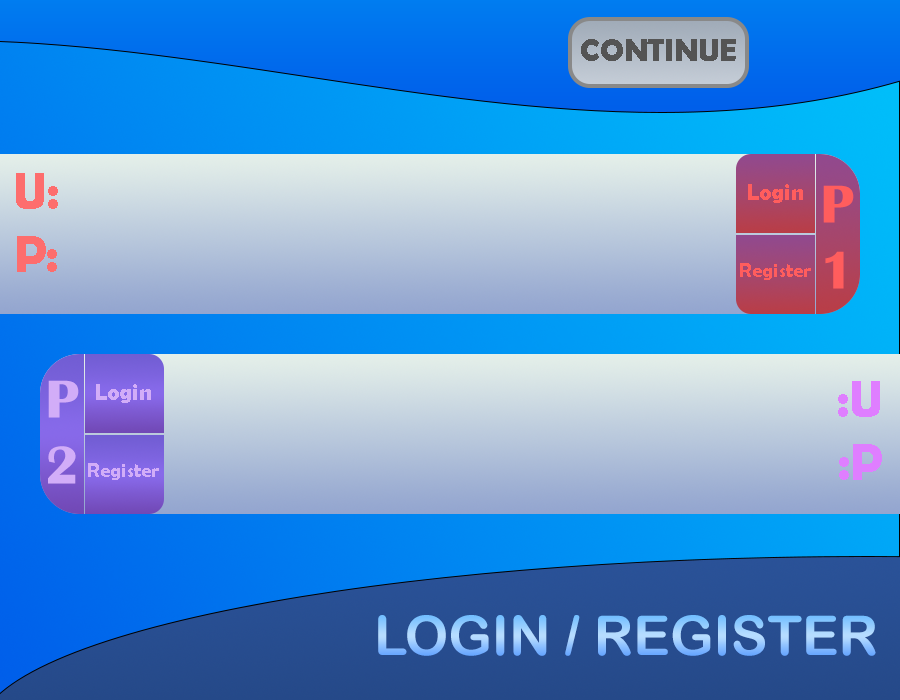
<style>
.page{position:relative;width:900px;height:700px}
.page>*{position:absolute;margin:0}
.t1{font:32px "BerlinSansFBDemi-Bold";color:#545454}
.t2{font:51.9px "BerlinSansFBDemi-Bold";color:#fd6d6d;scale:0.96 1}
.t3{font:23px "BerlinSansFBDemi-Bold";color:#ff5d5d}
.t4{font:55px "BritannicBold";color:#ff5d5d}
.t5{font:20px "BerlinSansFBDemi-Bold";color:#ff5d5d}
.t6{font:55px "BritannicBold";color:#d2adf8}
.t7{font:23px "BerlinSansFBDemi-Bold";color:#d2adf8}
.t8{font:51.9px "BerlinSansFBDemi-Bold";color:#df7eff;scale:0.96 1}
.t9{font:20px "BerlinSansFBDemi-Bold";color:#d2adf8}
.t10{font:55px "ArialRoundedMTBold"}
</style>
<div class="page">
<p class="t1" style="left:581px;top:39px;width:155px;height:22px">CONTINUE</p>
<p class="t2" style="left:16px;top:173px;width:42px;height:99px;text-align:center">U:<br>P:</p>
<p class="t3" style="left:748px;top:184px;width:55px;height:19px">Login</p>
<p class="t4" style="left:823px;top:185px;width:31px;height:104px;text-align:center">P1</p>
<p class="t5" style="left:740px;top:263px;width:71px;height:17px">Register</p>
<p class="t6" style="left:48px;top:380px;width:31px;height:104px;text-align:center">P2</p>
<p class="t7" style="left:96px;top:384px;width:55px;height:19px">Login</p>
<p class="t8" style="left:838px;top:381px;width:44px;height:99px;text-align:center">:U<br>:P</p>
<p class="t9" style="left:88px;top:463px;width:71px;height:17px">Register</p>
<p class="t10" style="left:378px;top:615px;width:498px;height:41px">LOGIN / REGISTER</p>
</div>
